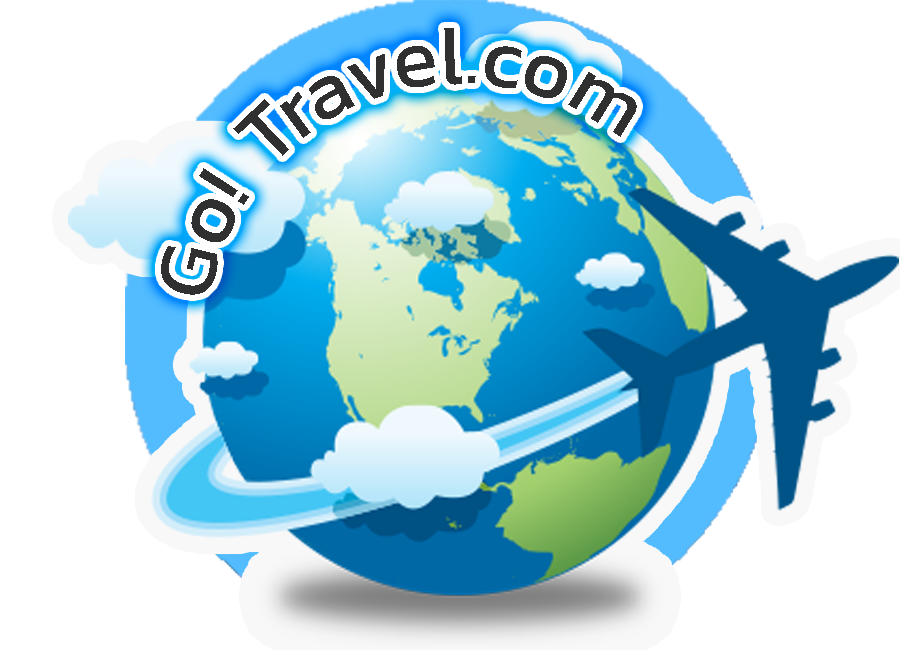
<style>
.page{position:relative;width:900px;height:650px;background:#ffffff}
.page>*{position:absolute;margin:0}
.t1{font:83px "Kanit-Regular";color:#303030}
</style>
<div class="page">
<p class="t1" style="left:161px;top:28px;width:476px;height:267px;text-align:center">Go! Travel.com</p>
</div>
